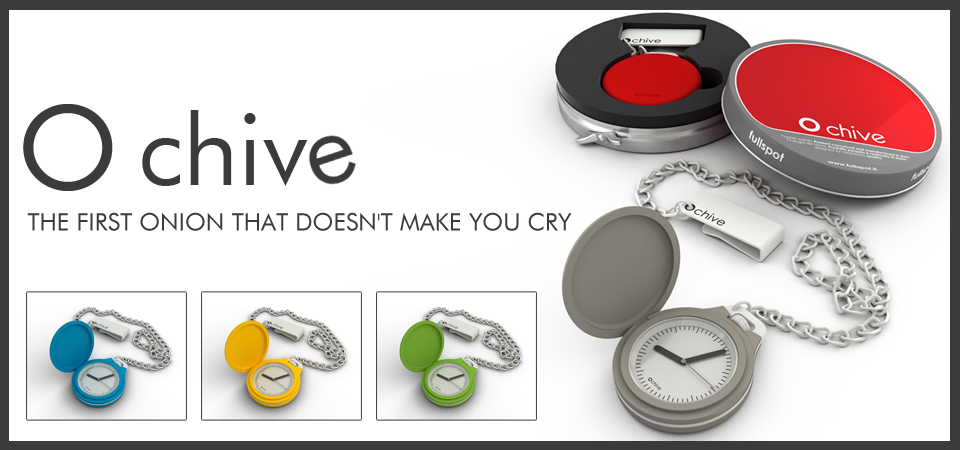
<style>
.page{position:relative;width:960px;height:450px;background:#ffffff}
.page>*{position:absolute;margin:0}
.t1{font:116.8px "FuturaBT-Book";color:#3b3b3b}
.t2{font:24px "FuturaBT-Book";color:#3b3b3b}
</style>
<div class="page">
<p class="t1" style="left:23px;top:104px;width:90px;height:87px">O</p>
<p class="t2" style="left:27px;top:212px;width:545px;height:19px">THE FIRST ONION THAT DOESN'T MAKE YOU CRY</p>
</div>
